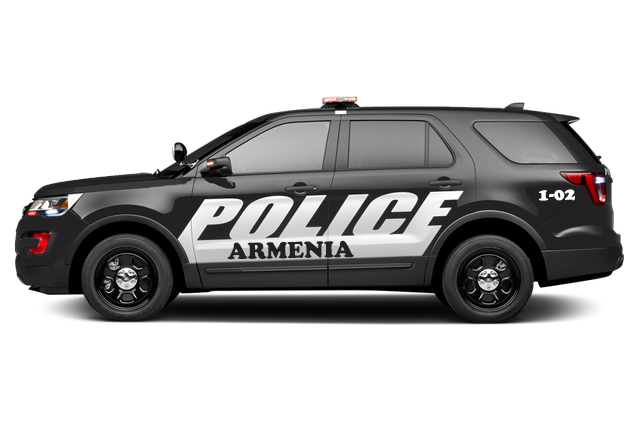
<style>
.page{position:relative;width:640px;height:422px;background:#ffffff}
.page>*{position:absolute;margin:0}
.t1{font:18px "CooperBlack";color:#ffffff}
.t2{font:24px "CooperBlack";color:#212123}
</style>
<div class="page">
<p class="t1" style="left:539px;top:189px;width:36px;height:12px;rotate:-2deg">1-02</p>
<p class="t2" style="left:227px;top:240px;width:127px;height:20px;rotate:-1deg">ARMENIA</p>
</div>
